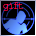
<style>
.page{position:relative;width:36px;height:36px;background:#000000}
.page>*{position:absolute;margin:0}
.t1{font:10px "Courier";letter-spacing:-0.119em;color:#ff003c}
</style>
<div class="page">
<p class="t1" style="left:3px;top:2px;width:20px;height:9px">gift</p>
</div>
